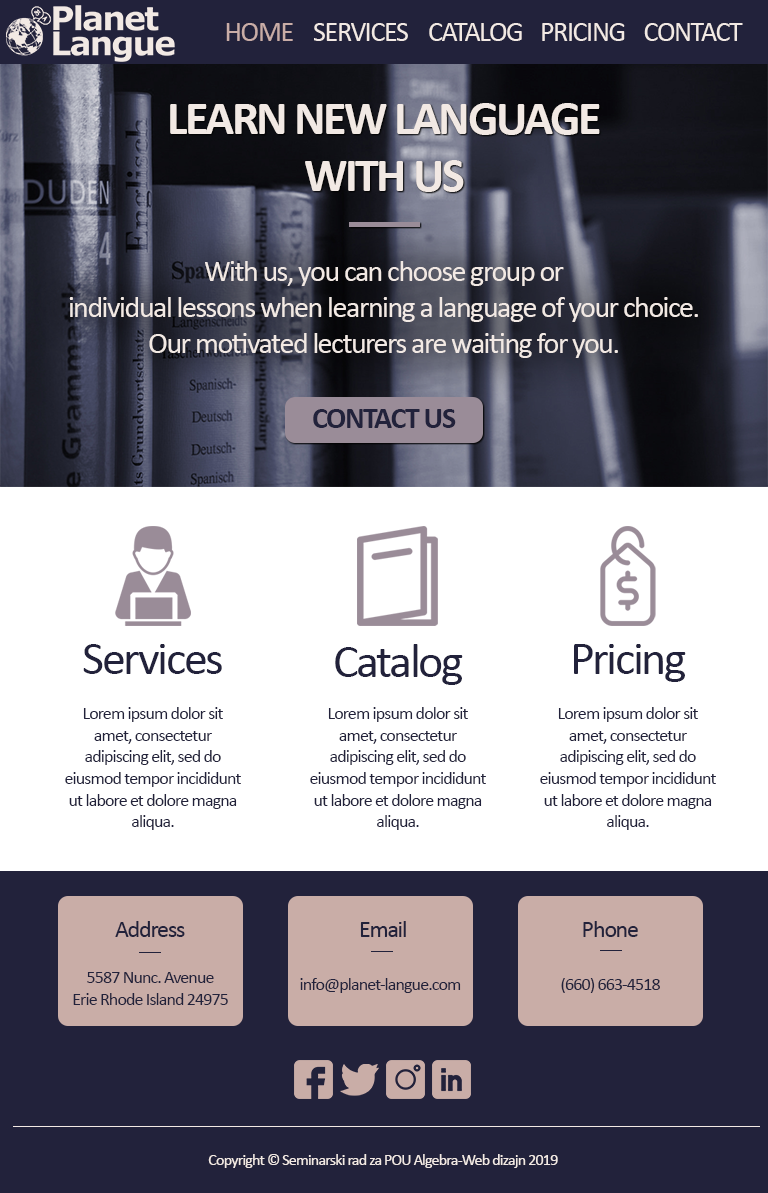
<style>
.page{position:relative;width:768px;height:1193px;background:#ffffff}
.page>*{position:absolute;margin:0}
.t1{font:28px "Calibri";letter-spacing:-0.05em;color:#c9ada7}
.t2{font:28px "Calibri";letter-spacing:-0.05em;color:#f2e9e4}
.t3{font:48px "Calibri-Bold";letter-spacing:-0.05em;color:#f2e9e4}
.t4{font:30px "Calibri";letter-spacing:-0.05em;color:#f2e9e4}
.t5{font:30px "Calibri-Bold";letter-spacing:-0.05em;color:#22223b}
.t6{font:48px "Calibri";letter-spacing:-0.05em;color:#22223b}
.t7{font:18px "Calibri";letter-spacing:-0.05em;color:#22223b}
.t8{font:24px "Calibri";letter-spacing:-0.05em;color:#22223b}
.t9{font:16px "Calibri";letter-spacing:-0.05em;color:#f2e9e4}
</style>
<div class="page">
<p class="t1" style="left:226px;top:23px;width:67px;height:18px">HOME</p>
<p class="t2" style="left:314px;top:23px;width:94px;height:18px">SERVICES</p>
<p class="t2" style="left:429px;top:23px;width:93px;height:18px">CATALOG</p>
<p class="t2" style="left:542px;top:23px;width:83px;height:18px">PRICING</p>
<p class="t2" style="left:644px;top:23px;width:99px;height:18px">CONTACT</p>
<p class="t3" style="left:170px;top:103px;width:430px;height:89px;text-align:center">LEARN NEW LANGUAGE<br>WITH US</p>
<p class="t4" style="left:69px;top:261px;width:629px;height:97px;text-align:center">With us, you can choose group or <br>individual lessons when learning a language of your choice. <br>Our motivated lecturers are waiting for you.</p>
<p class="t5" style="left:313px;top:409px;width:143px;height:19px">CONTACT US</p>
<p class="t6" style="left:83px;top:644px;width:139px;height:30px">Services</p>
<p class="t6" style="left:335px;top:644px;width:128px;height:41px">Catalog</p>
<p class="t6" style="left:574px;top:644px;width:112px;height:38px">Pricing</p>
<p class="t7" style="left:65px;top:707px;width:176px;height:123px;text-align:center">Lorem ipsum dolor sit amet, consectetur adipiscing elit, sed do eiusmod tempor incididunt ut labore et dolore magna aliqua.</p>
<p class="t7" style="left:310px;top:707px;width:176px;height:123px;text-align:center">Lorem ipsum dolor sit amet, consectetur adipiscing elit, sed do eiusmod tempor incididunt ut labore et dolore magna aliqua.</p>
<p class="t7" style="left:540px;top:707px;width:176px;height:123px;text-align:center">Lorem ipsum dolor sit amet, consectetur adipiscing elit, sed do eiusmod tempor incididunt ut labore et dolore magna aliqua.</p>
<p class="t8" style="left:115px;top:921px;width:70px;height:16px">Address</p>
<p class="t8" style="left:360px;top:921px;width:46px;height:16px">Email</p>
<p class="t8" style="left:583px;top:921px;width:55px;height:16px">Phone</p>
<p class="t7" style="left:73px;top:972px;width:155px;height:33px;text-align:center">5587 Nunc. Avenue<br>Erie Rhode Island 24975</p>
<p class="t7" style="left:300px;top:978px;width:161px;height:15px">info@planet-langue.com</p>
<p class="t7" style="left:561px;top:978px;width:99px;height:15px">(660) 663-4518</p>
<p class="t9" style="left:208px;top:1154px;width:350px;height:14px">Copyright © Seminarski rad za POU Algebra-Web dizajn 2019</p>
</div>
